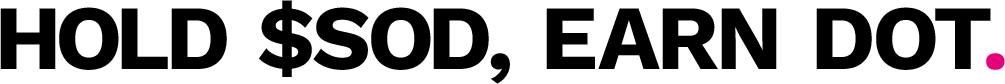
<style>
.page{position:relative;width:1005px;height:84px;background:#ffffff}
.page>*{position:absolute;margin:0}
.t1{font:91.7px "WorkSans-Bold";color:#000000}
.t2{font:91.7px "WorkSans-Bold";color:#e6007a}
</style>
<div class="page">
<p class="t1" style="left:0px;top:0px;width:1005px;height:84px">HOLD $SOD, EARN DOT<span class="t2">.</span></p>
</div>
